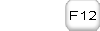
<style>
.page{position:relative;width:100px;height:31px;background:#ffffff}
.page>*{position:absolute;margin:0}
.t1{font:12px "ArialMT";color:#000000;scale:1.42 1}
</style>
<div class="page">
<p class="t1" style="left:70px;top:11px;width:26px;height:9px">F12</p>
</div>
